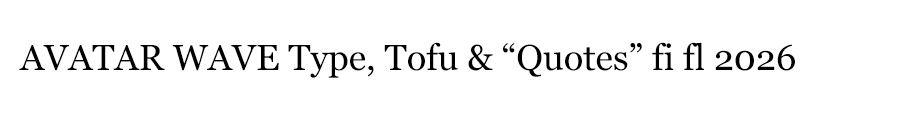
<style>
.page{position:relative;width:900px;height:120px;background:#ffffff}
.page>*{position:absolute;margin:0}
.t1{font:36px "Georgia";color:#000000}
</style>
<div class="page">
<p class="t1" style="left:19px;top:42px;width:776px;height:36px">AVATAR WAVE Type, Tofu &amp; “Quotes” fi fl 2026</p>
</div>
